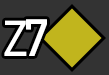
<style>
.page{position:relative;width:109px;height:75px;background:#333333}
.page>*{position:absolute;margin:0}
.t1{font:52px "Gidole-Regular";letter-spacing:-0.12em;color:#ffffff;font-weight:bold}
</style>
<div class="page">
<p class="t1" style="left:4px;top:19px;width:43px;height:37px">Z7</p>
</div>
